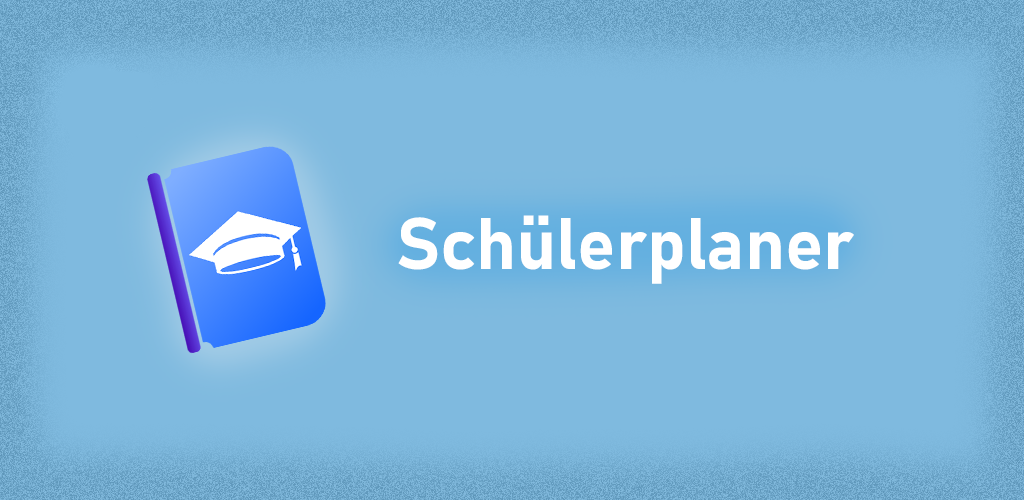
<style>
.page{position:relative;width:1024px;height:500px;background:#7fbadf}
.page>*{position:absolute;margin:0}
.t1{font:72px "Bahnschrift-Bold";color:#ffffff}
</style>
<div class="page">
<p class="t1" style="left:398px;top:215px;width:456px;height:69px">Schülerplaner</p>
</div>
